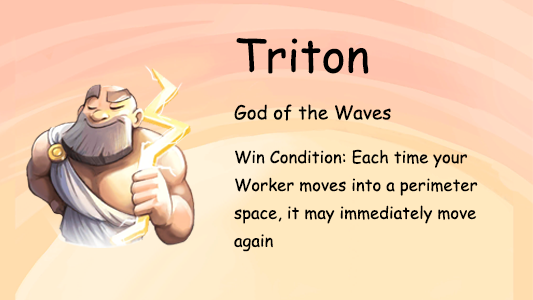
<style>
.page{position:relative;width:533px;height:300px}
.page>*{position:absolute;margin:0}
.t1{font:45.8px "ComicSansMS";color:#000000}
.t2{font:18.8px "ComicSansMS";color:#000000}
.t3{font:16.7px/27.9px "ComicSansMS";color:#000000}
</style>
<div class="page">
<p class="t1" style="left:236px;top:38px;width:133px;height:36px">Triton</p>
<p class="t2" style="left:234px;top:104px;width:157px;height:17px">God of the Waves</p>
<p class="t3" style="left:234px;top:149px;width:244px;height:103px">Win Condition: Each time your Worker moves into a perimeter space, it may immediately move again</p>
</div>
